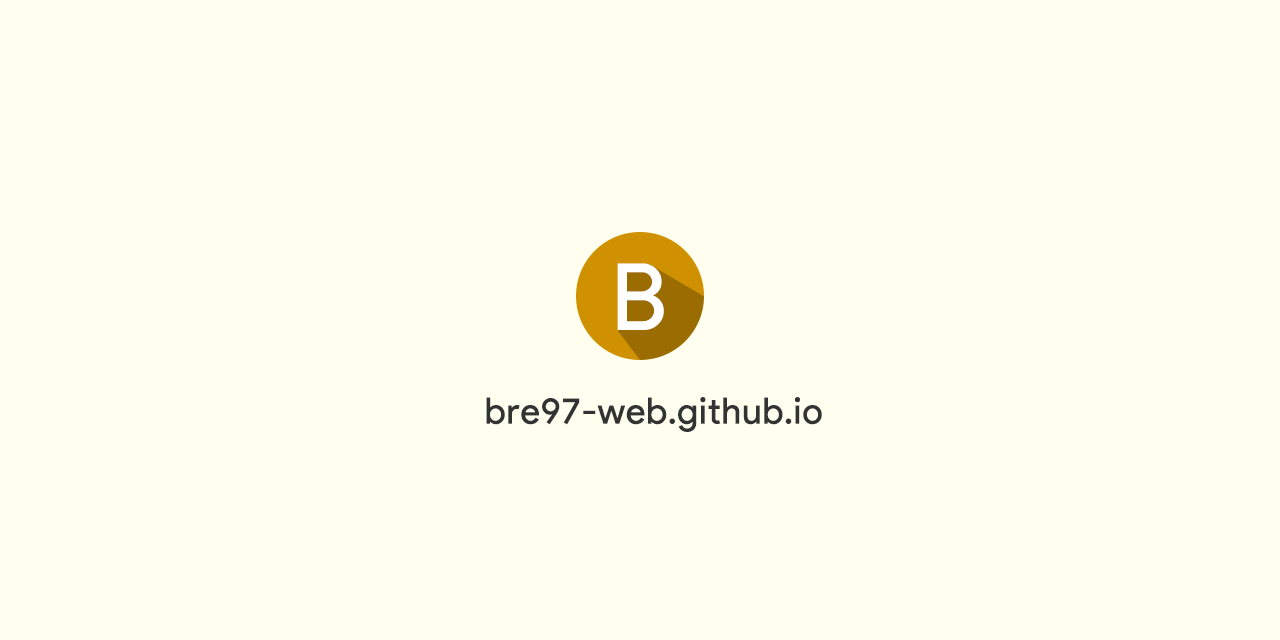
<style>
.page{position:relative;width:1280px;height:640px;background:#fffff0}
.page>*{position:absolute;margin:0}
.t1{font:91.6px "ProductSans-Regular";color:#ffffff;font-weight:bold}
.t2{font:36px "ProductSans-Regular";color:#323333;font-weight:bold}
</style>
<div class="page">
<p class="t1" style="left:617px;top:263px;width:47px;height:67px">B</p>
<p class="t2" style="left:486px;top:397px;width:336px;height:35px">bre97-web.github.io</p>
</div>
